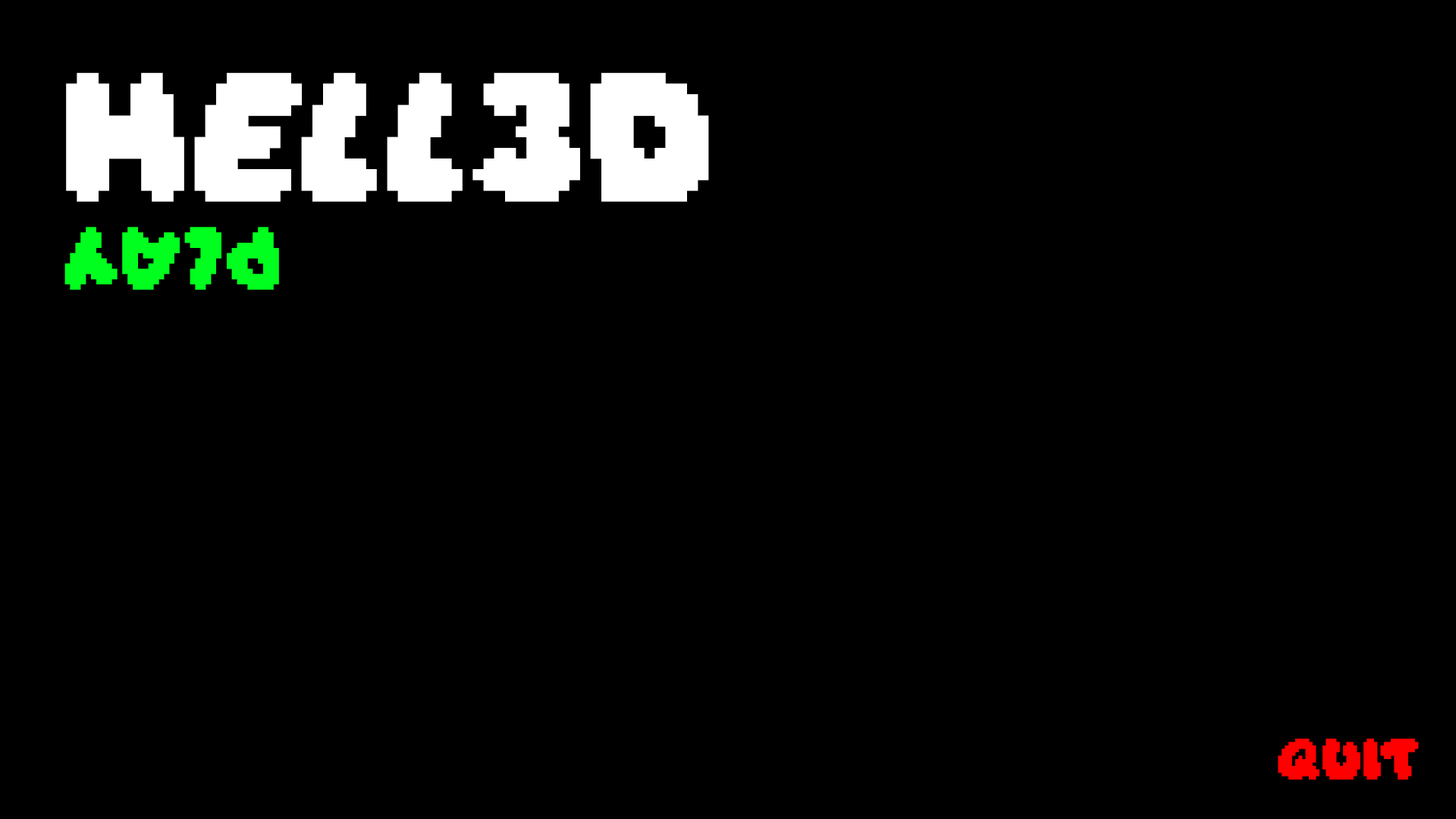
<style>
.page{position:relative;width:1456px;height:819px;background:#000000}
.page>*{position:absolute;margin:0}
.t1{font:114.1px "Daydream";color:#ffffff}
.t2{font:55.6px "Daydream";color:#00ff1e}
.t3{font:36.4px "Daydream";color:#ff0000}
</style>
<div class="page">
<p class="t1" style="left:66px;top:73px;width:643px;height:129px">Hell3D</p>
<p class="t2" style="left:64px;top:227px;width:215px;height:63px;rotate:180deg">PLAY</p>
<p class="t3" style="left:1278px;top:739px;width:141px;height:41px">QUIT</p>
</div>
